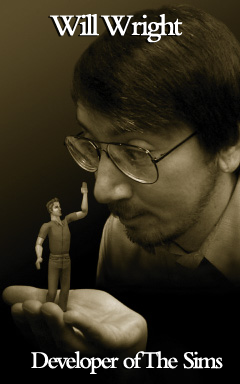
<style>
.page{position:relative;width:240px;height:384px}
.page>*{position:absolute;margin:0}
.t1{font:31.2px "BemboMT-SemiBold";letter-spacing:-0.08em;color:#ffffff;scale:0.95 1}
.t2{font:25px "BemboMT-SemiBold";letter-spacing:-0.08em;color:#ffffff;scale:0.95 1}
</style>
<div class="page">
<p class="t1" style="left:50px;top:14px;width:133px;height:29px">Will Wright</p>
<p class="t2" style="left:31px;top:351px;width:192px;height:23px">Developer of The Sims</p>
</div>
